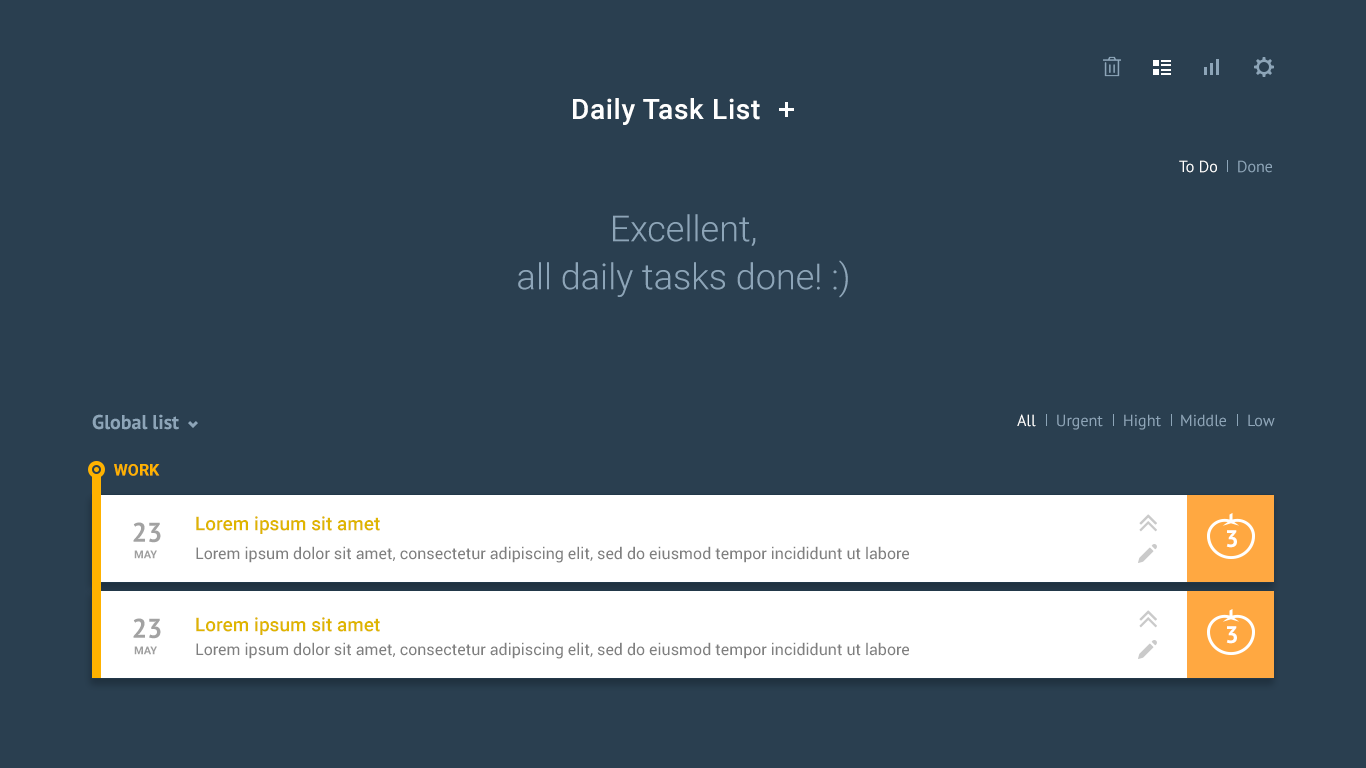
<style>
.page{position:relative;width:1366px;height:768px;background:#2a3f50}
.page>*{position:absolute;margin:0}
.t1{font:28px "Roboto-Medium";letter-spacing:0.025em;color:#ffffff}
.t2{font:16px "PTSans-Regular";color:#ffffff}
.t3{font:16px "PTSans-Regular";color:#8da5b8}
.t4{font:36px/48px "Roboto-Light";color:#8da5b8}
.t5{font:20px "PTSans-Bold";color:#8da5b8}
.t6{font:16px "PTSans-Regular";color:#8ea5b8}
.t7{font:16px "Roboto-Bold";color:#ffb200}
.t8{font:19px "Roboto-Medium";color:#dfb500}
.t9{font:27px "PTSans-Bold";color:#a2a2a2}
.t10{font:24px "PTSans-Bold";color:#ffffff}
.t11{font:11px "Roboto-Bold";color:#9f9f9f}
.t12{font:16px "Roboto-Regular";color:#7f7f7f}
</style>
<div class="page">
<p class="t1" style="left:573px;top:98px;width:187px;height:27px">Daily Task List</p>
<p class="t2" style="left:1179px;top:160px;width:38px;height:13px">To Do</p>
<p class="t3" style="left:1238px;top:160px;width:34px;height:13px">Done</p>
<p class="t4" style="left:518px;top:214px;width:330px;height:84px;text-align:center">Excellent,<br>all daily tasks done! :)</p>
<p class="t5" style="left:92px;top:414px;width:87px;height:16px">Global list</p>
<p class="t2" style="left:1017px;top:414px;width:19px;height:13px">All</p>
<p class="t6" style="left:1057px;top:414px;width:46px;height:16px">Urgent</p>
<p class="t6" style="left:1124px;top:414px;width:37px;height:16px">Hight</p>
<p class="t6" style="left:1181px;top:414px;width:45px;height:13px">Middle</p>
<p class="t6" style="left:1248px;top:414px;width:27px;height:13px">Low</p>
<p class="t7" style="left:114px;top:464px;width:46px;height:12px">WORK</p>
<p class="t8" style="left:196px;top:516px;width:184px;height:18px">Lorem ipsum sit amet</p>
<p class="t9" style="left:133px;top:522px;width:28px;height:21px">23</p>
<p class="t10" style="left:1226px;top:530px;width:11px;height:18px">3</p>
<p class="t11" style="left:134px;top:550px;width:23px;height:9px">MAY</p>
<p class="t12" style="left:196px;top:546px;width:713px;height:17px">Lorem ipsum dolor sit amet, consectetur adipiscing elit, sed do eiusmod tempor incididunt ut labore</p>
<p class="t8" style="left:196px;top:617px;width:184px;height:18px">Lorem ipsum sit amet</p>
<p class="t9" style="left:133px;top:618px;width:28px;height:21px">23</p>
<p class="t10" style="left:1226px;top:626px;width:11px;height:18px">3</p>
<p class="t11" style="left:134px;top:646px;width:23px;height:9px">MAY</p>
<p class="t12" style="left:196px;top:642px;width:713px;height:17px">Lorem ipsum dolor sit amet, consectetur adipiscing elit, sed do eiusmod tempor incididunt ut labore</p>
</div>
